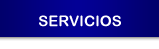
<style>
.page{position:relative;width:159px;height:49px}
.page>*{position:absolute;margin:0}
.t1{font:15px "ArialRoundedMTBold";color:#ffffff}
</style>
<div class="page">
<p class="t1" style="left:39px;top:15px;width:82px;height:12px">SERVICIOS</p>
</div>
